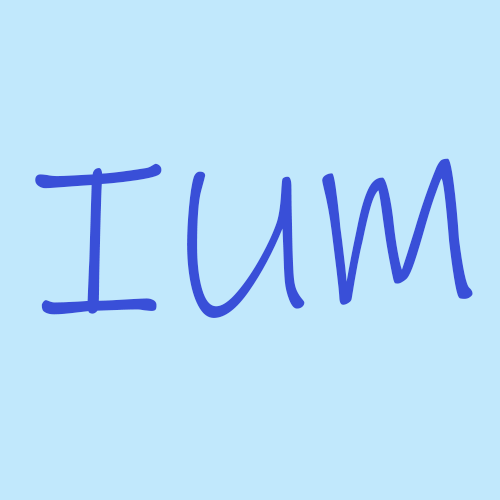
<style>
.page{position:relative;width:500px;height:500px;background:#c1e8fc}
.page>*{position:absolute;margin:0}
.t1{font:211.7px "InkFree";color:#394fd8}
</style>
<div class="page">
<p class="t1" style="left:35px;top:158px;width:438px;height:160px">IUM</p>
</div>
